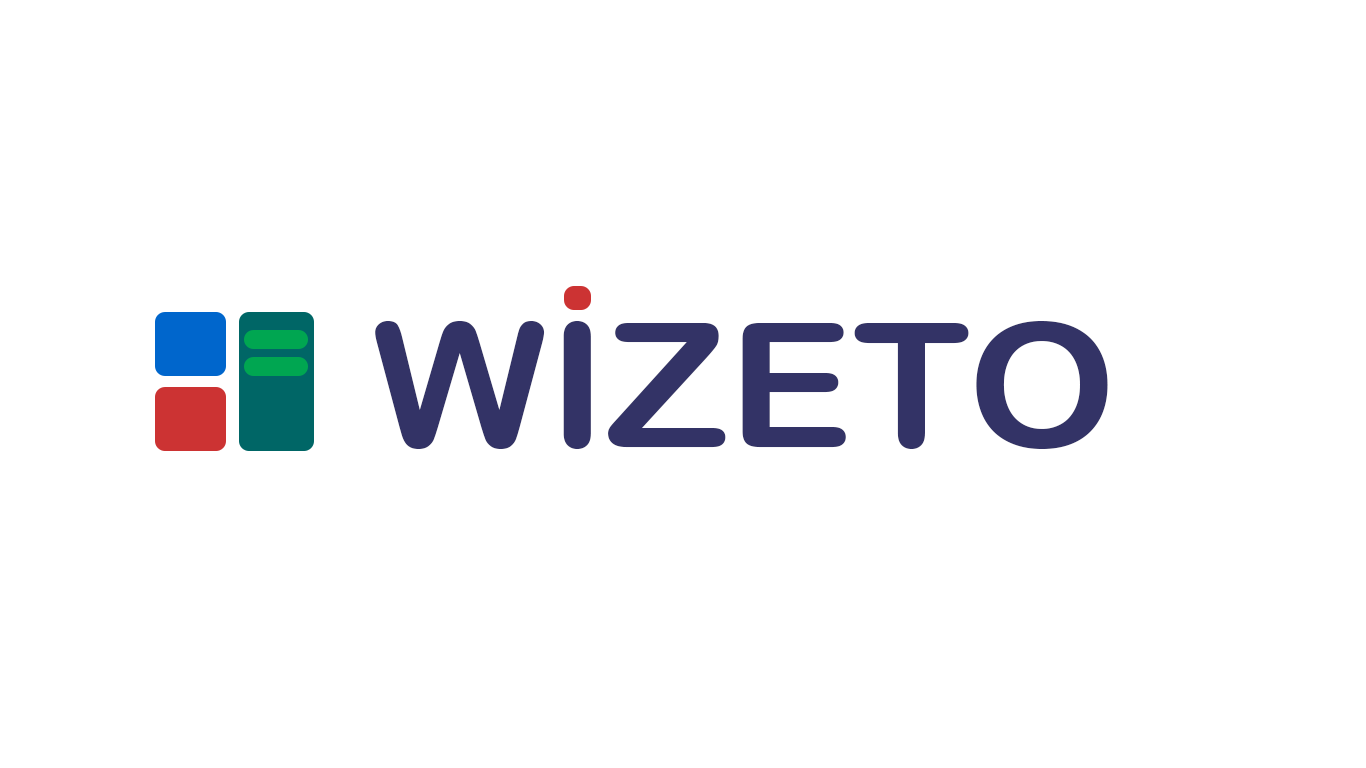
<style>
.page{position:relative;width:1366px;height:768px;background:#ffffff}
.page>*{position:absolute;margin:0}
.t1{font:173.2px "ArialRoundedMTBold";color:#333366;scale:1.08 1}
</style>
<div class="page">
<p class="t1" style="left:375px;top:321px;width:733px;height:128px">WIZETO</p>
</div>
